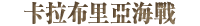
<style>
.page{position:relative;width:200px;height:26px;background:#ffffff}
.page>*{position:absolute;margin:0}
.t1{font:24px "RyuminPro-ExBold";font-weight:bold;scale:0.9 1}
</style>
<div class="page">
<p class="t1" style="left:24px;top:1px;width:152px;height:24px">卡拉布里亞海戰</p>
</div>
